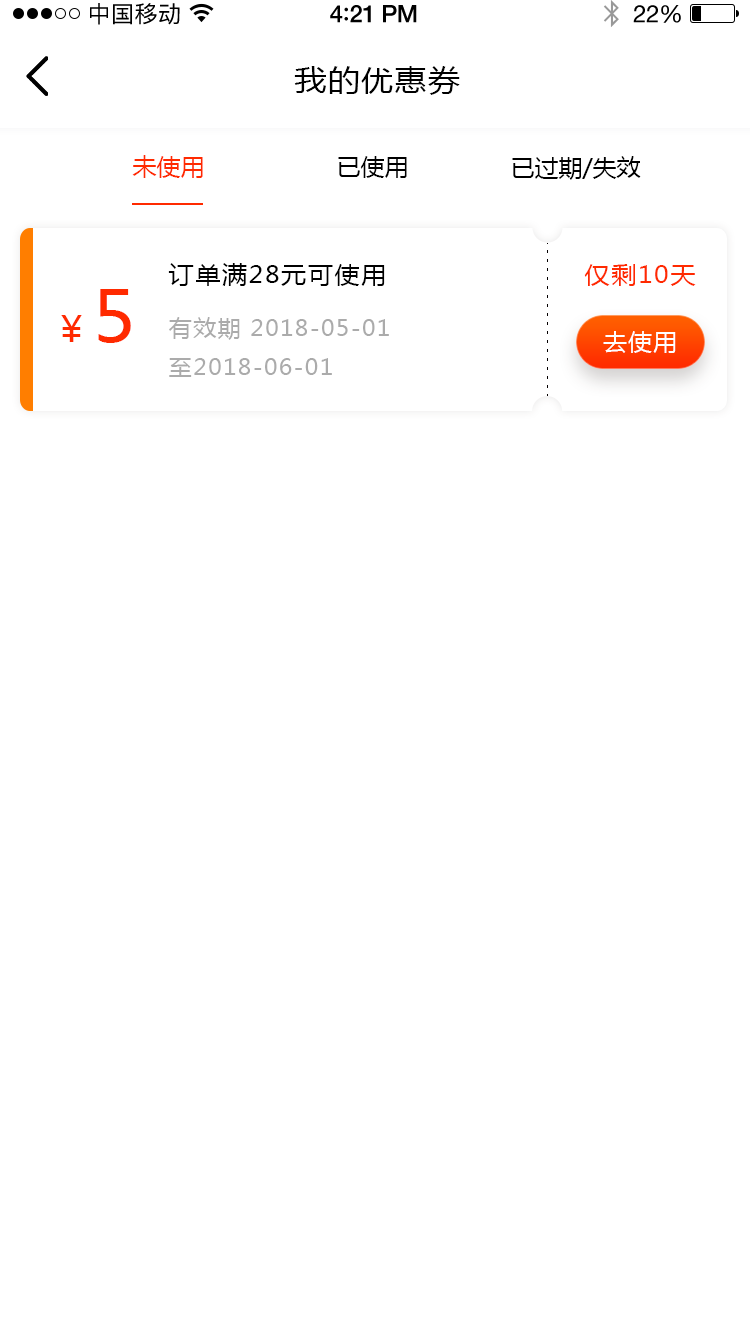
<style>
.page{position:relative;width:750px;height:1334px;background:#ffffff}
.page>*{position:absolute;margin:0}
.t1{font:23px "PingFangSC-Regular";letter-spacing:0.02em;color:#000000}
.t2{font:24px "HelveticaNeue-Medium";letter-spacing:-0.02em;color:#000000}
.t3{font:26px "Avenir-Medium";letter-spacing:-0.02em;color:#000000}
.t4{font:24px "HelveticaNeue";letter-spacing:-0.02em;color:#000000}
.t5{font:30px "MicrosoftYaHei";letter-spacing:0.05em;color:#000000;scale:1.06 1}
.t6{font:24px "MicrosoftYaHei";color:#ff2a00;text-transform:uppercase}
.t7{font:24px "MicrosoftYaHei";color:#000000;text-transform:uppercase}
.t8{font:24px "MicrosoftYaHei";letter-spacing:0.05em;color:#000000;scale:1.06 1}
.t9{font:24px "MicrosoftYaHei";letter-spacing:0.05em;color:#ff2a00;scale:1.06 1}
.t10{font:35px "MicrosoftYaHei";letter-spacing:0.05em;color:#ff2a00;scale:1.07 1}
.t11{font:70.1px "MicrosoftYaHei";letter-spacing:0.05em;color:#ff2a00;scale:1.07 1}
.t12{font:22px "MicrosoftYaHei";letter-spacing:0.05em;color:#ababab;scale:1.06 1}
.t13{font:24px "MicrosoftYaHei";letter-spacing:0.05em;color:#ffffff;text-transform:uppercase}
</style>
<div class="page">
<p class="t1" style="left:90px;top:3px;width:90px;height:22px">中国移动</p>
<p class="t2" style="left:330px;top:5px;width:87px;height:18px">4<span class="t3">:</span>21 PM</p>
<p class="t4" style="left:633px;top:5px;width:48px;height:18px">22%</p>
<p class="t5" style="left:294px;top:66px;width:166px;height:29px">我的优惠券</p>
<p class="t6" style="left:132px;top:155px;width:71px;height:23px">未使用</p>
<p class="t7" style="left:338px;top:156px;width:69px;height:22px">已使用</p>
<p class="t7" style="left:512px;top:156px;width:129px;height:24px">已过期/失效</p>
<p class="t8" style="left:168px;top:263px;width:217px;height:23px">订单满28元可使用</p>
<p class="t9" style="left:584px;top:264px;width:112px;height:22px">仅剩10天</p>
<p class="t10" style="left:61px;top:289px;width:70px;height:54px">￥<span class="t11">5</span></p>
<p class="t12" style="left:169px;top:317px;width:220px;height:60px">有效期 2018-05-01<br>至2018-06-01</p>
<p class="t13" style="left:603px;top:331px;width:73px;height:22px">去使用</p>
</div>
